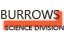
<style>
.page{position:relative;width:64px;height:40px;background:#ffffff}
.page>*{position:absolute;margin:0}
.t1{font:12.8px "NirmalaUI";color:#343028}
.t2{font:6px "NirmalaUI";color:#343028;scale:1.2 1}
</style>
<div class="page">
<p class="t1" style="left:1px;top:10px;width:59px;height:9px">BURROWS</p>
<p class="t2" style="left:5px;top:25px;width:59px;height:6px">SCIENCE DIVISION</p>
</div>
